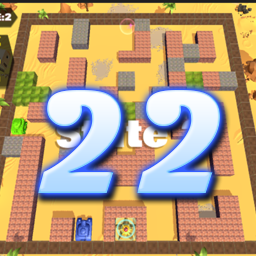
<style>
.page{position:relative;width:256px;height:256px}
.page>*{position:absolute;margin:0}
.t1{font:148.3px "Magneto-Bold";letter-spacing:0.02em;scale:0.91 1}
</style>
<div class="page">
<p class="t1" style="left:38px;top:90px;width:182px;height:103px">22</p>
</div>
